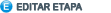
<style>
.page{position:relative;width:111px;height:13px;background:#ffffff}
.page>*{position:absolute;margin:0}
.t1{font:8.7px "ArialRoundedMTBold";color:#465864;font-weight:bold}
</style>
<div class="page">
<p class="t1" style="left:16px;top:3px;width:67px;height:8px">EDITAR ETAPA</p>
</div>
